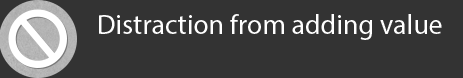
<style>
.page{position:relative;width:463px;height:78px;background:#333333}
.page>*{position:absolute;margin:0}
.t1{font:27.9px "MyriadPro-Regular";color:#ffffff}
</style>
<div class="page">
<p class="t1" style="left:99px;top:14px;width:343px;height:26px">Distraction from adding value</p>
</div>
